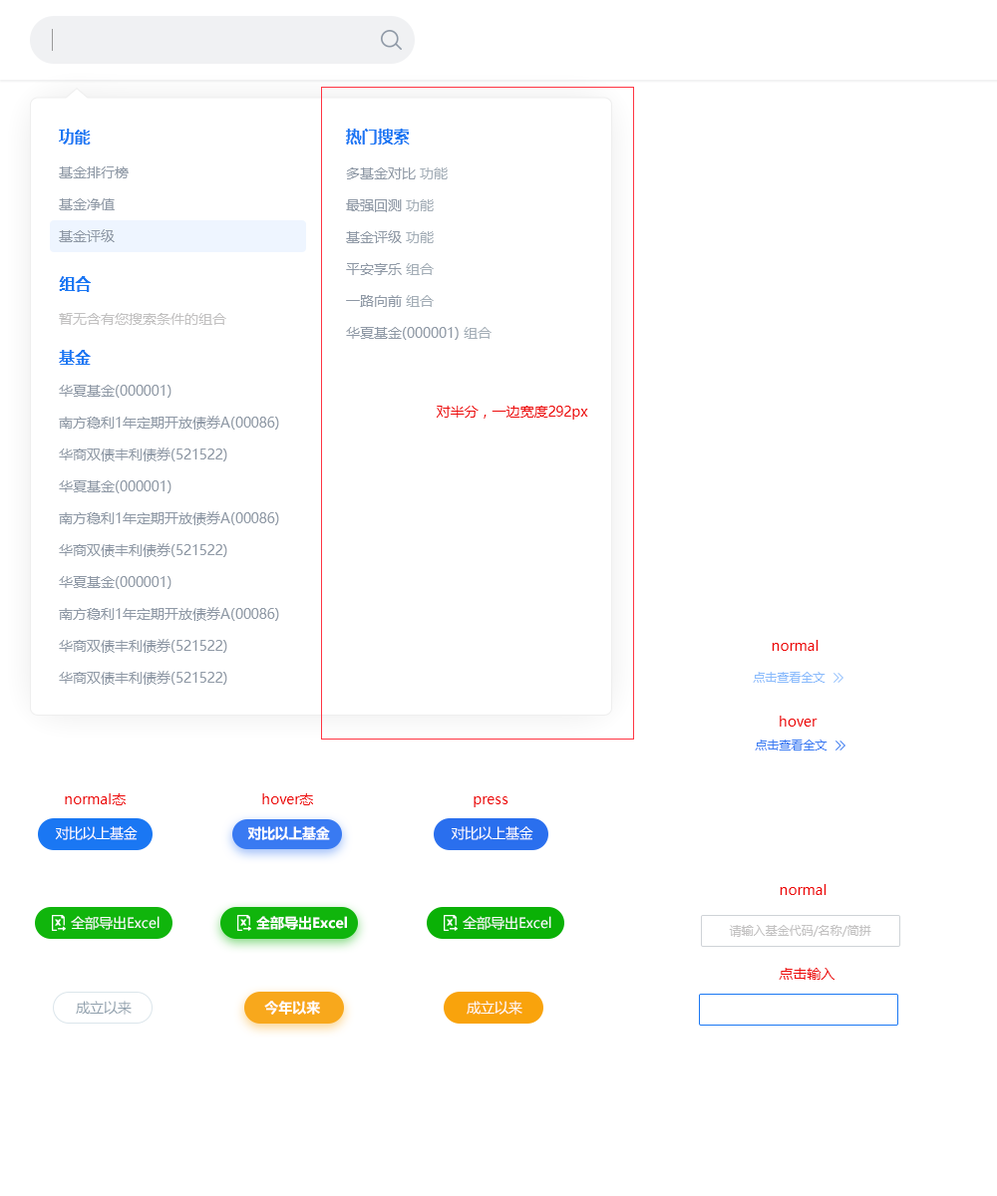
<style>
.page{position:relative;width:997px;height:1196px;background:#ffffff}
.page>*{position:absolute;margin:0}
.t1{font:15.9px "MicrosoftYaHei-Bold";color:#1a77f3}
.t2{font:14px/31.9px "MicrosoftYaHei";color:#8f99a6}
.t3{font:14px/31.9px "MicrosoftYaHei";color:#a4aeb7}
.t4{font:14px "MicrosoftYaHei";color:#c2c1c1}
.t5{font:14px "MicrosoftYaHei";color:#ed0909}
.t6{font:12px "MicrosoftYaHei";color:#8abbfc}
.t7{font:12px "MicrosoftYaHei";color:#397af2}
.t8{font:14px "MicrosoftYaHei";letter-spacing:-0.025em;color:#ffffff}
.t9{font:14px "MicrosoftYaHei-Bold";letter-spacing:-0.025em;color:#ffffff}
.t10{font:14px "MicrosoftYaHei";color:#ffffff}
.t11{font:14px "MicrosoftYaHei-Bold";color:#ffffff}
.t12{font:12px "MicrosoftYaHei";color:#c2c1c1}
.t13{font:14px "MicrosoftYaHei";color:#8e9eab}
</style>
<div class="page">
<p class="t1" style="left:59px;top:129px;width:32px;height:16px">功能</p>
<p class="t1" style="left:346px;top:129px;width:64px;height:16px">热门搜索</p>
<p class="t2" style="left:59px;top:166px;width:70px;height:76px">基金排行榜<br>基金净值<br>基金评级</p>
<p class="t2" style="left:346px;top:167px;width:145px;height:173px">多基金对比 <span class="t3">功能<br></span>最强回测 <span class="t3">功能<br></span>基金评级 <span class="t3">功能<br></span>平安享乐 <span class="t3">组合<br></span>一路向前 <span class="t3">组合<br></span>华夏基金(000001) <span class="t3">组合</span></p>
<p class="t1" style="left:59px;top:276px;width:32px;height:16px">组合</p>
<p class="t4" style="left:59px;top:313px;width:167px;height:12px">暂无含有您搜索条件的组合</p>
<p class="t1" style="left:59px;top:350px;width:32px;height:15px">基金</p>
<p class="t2" style="left:59px;top:385px;width:220px;height:300px">华夏基金(000001)<br>南方稳利1年定期开放债券A(00086)<br>华商双债丰利债券(521522)<br>华夏基金(000001)<br>南方稳利1年定期开放债券A(00086)<br>华商双债丰利债券(521522)<br>华夏基金(000001)<br>南方稳利1年定期开放债券A(00086)<br>华商双债丰利债券(521522)<br>华商双债丰利债券(521522)</p>
<p class="t5" style="left:437px;top:406px;width:151px;height:14px">对半分，一边宽度292px</p>
<p class="t5" style="left:772px;top:640px;width:46px;height:11px">normal</p>
<p class="t6" style="left:753px;top:672px;width:72px;height:11px">点击查看全文</p>
<p class="t5" style="left:780px;top:716px;width:37px;height:11px">hover</p>
<p class="t7" style="left:755px;top:740px;width:72px;height:11px">点击查看全文</p>
<p class="t5" style="left:65px;top:793px;width:443px;height:14px">normal态                                  hover态                                        press</p>
<p class="t8" style="left:55px;top:826px;width:83px;height:14px">对比以上基金</p>
<p class="t9" style="left:247px;top:826px;width:83px;height:14px">对比以上基金</p>
<p class="t8" style="left:451px;top:826px;width:82px;height:14px">对比以上基金</p>
<p class="t5" style="left:780px;top:884px;width:46px;height:11px">normal</p>
<p class="t10" style="left:71px;top:916px;width:88px;height:14px">全部导出Excel</p>
<p class="t11" style="left:256px;top:916px;width:91px;height:14px">全部导出Excel</p>
<p class="t10" style="left:463px;top:916px;width:88px;height:14px">全部导出Excel</p>
<p class="t12" style="left:729px;top:925px;width:142px;height:12px">请输入基金代码/名称/简拼</p>
<p class="t5" style="left:779px;top:968px;width:55px;height:12px">点击输入</p>
<p class="t13" style="left:76px;top:1001px;width:56px;height:14px">成立以来</p>
<p class="t11" style="left:264px;top:1001px;width:56px;height:14px">今年以来</p>
<p class="t10" style="left:467px;top:1001px;width:55px;height:14px">成立以来</p>
</div>
